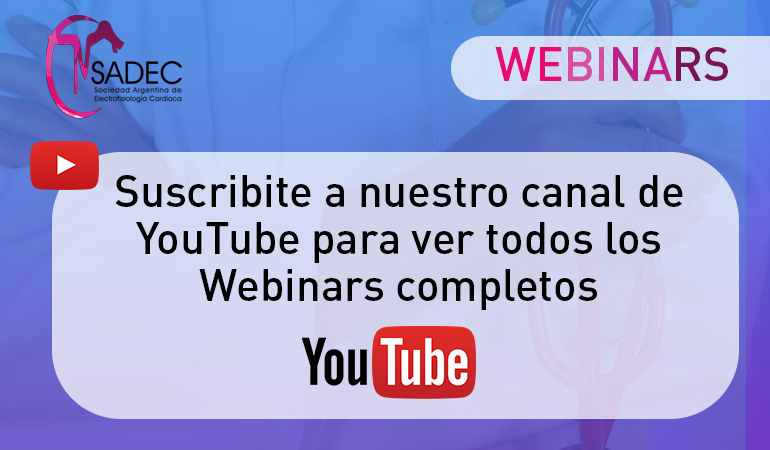
<style>
.page{position:relative;width:770px;height:450px}
.page>*{position:absolute;margin:0}
.t1{font:46.8px "DINPro-Medium";color:#e90b6c}
.t2{font:46.8px "DINPro-Medium";color:#d84e9c}
.t3{font:46.8px "DINPro-Medium";color:#bb238a}
.t4{font:46.8px "DINPro-Medium";color:#7c1451}
.t5{font:44px/46.8px "DINPro-Medium";color:#000000}
</style>
<div class="page">
<p class="t1" style="left:495px;top:47px;width:233px;height:34px">WE<span class="t2">BI</span><span class="t3">NA</span><span class="t4">RS</span></p>
<p class="t5" style="left:115px;top:175px;width:568px;height:135px;text-align:center">Suscribite a nuestro canal de YouTube para ver todos los Webinars completos</p>
</div>
